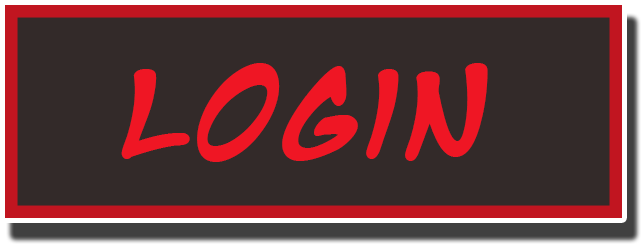
<style>
.page{position:relative;width:641px;height:244px;background:#332a29}
.page>*{position:absolute;margin:0}
.t1{font:100px "MangaTempleBold";color:#ef1624}
</style>
<div class="page">
<p class="t1" style="left:121px;top:63px;width:367px;height:99px">Login</p>
</div>
